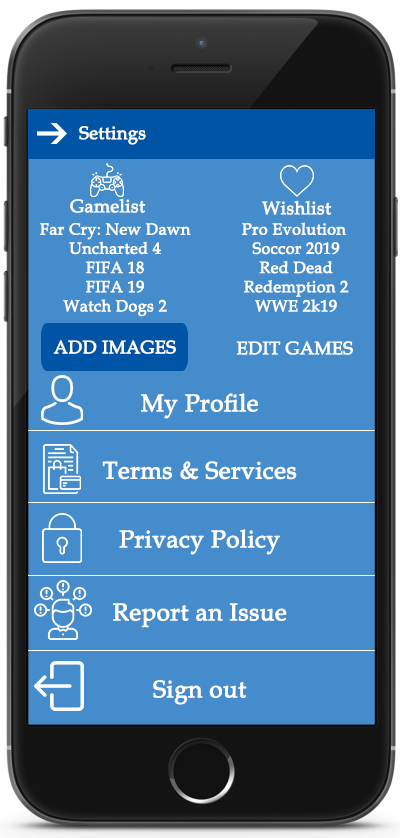
<style>
.page{position:relative;width:400px;height:838px;background:#448ccb}
.page>*{position:absolute;margin:0}
.t1{font:18px "BookAntiqua";color:#ffffff;font-weight:bold}
.t2{font:16px "BookAntiqua";color:#ffffff;font-weight:bold}
.t3{font:24px "BookAntiqua";color:#ffffff;font-weight:bold}
</style>
<div class="page">
<p class="t1" style="left:79px;top:126px;width:67px;height:19px">Settings</p>
<p class="t1" style="left:70px;top:198px;width:76px;height:15px">Gamelist</p>
<p class="t1" style="left:262px;top:200px;width:70px;height:15px">Wishlist</p>
<p class="t2" style="left:242px;top:222px;width:107px;height:90px;text-align:center">Pro Evolution <br>Soccor 2019<br>Red Dead<br>Redemption 2<br>WWE 2k19</p>
<p class="t2" style="left:40px;top:223px;width:151px;height:94px;text-align:center">Far Cry: New Dawn<br>Uncharted 4<br>FIFA 18<br>FIFA 19<br>Watch Dogs 2</p>
<p class="t1" style="left:53px;top:340px;width:123px;height:14px">ADD IMAGES</p>
<p class="t1" style="left:236px;top:341px;width:117px;height:14px">EDIT GAMES</p>
<p class="t3" style="left:141px;top:393px;width:117px;height:26px">My Profile</p>
<p class="t3" style="left:102px;top:461px;width:195px;height:19px">Terms &amp; Services</p>
<p class="t3" style="left:119px;top:529px;width:161px;height:26px">Privacy Policy</p>
<p class="t3" style="left:113px;top:603px;width:174px;height:25px">Report an Issue</p>
<p class="t3" style="left:153px;top:680px;width:94px;height:25px">Sign out</p>
</div>
